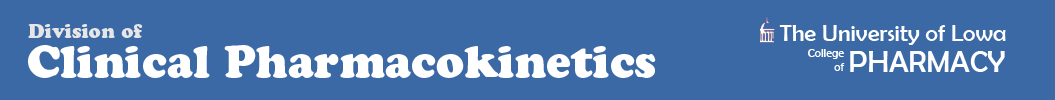
<style>
.page{position:relative;width:1055px;height:100px;background:#3b69a5}
.page>*{position:absolute;margin:0}
.t1{font:19.4px "CooperBlackStd";color:#e6e6e6}
.t2{font:24px "BerlinSansFB-Reg";color:#ffffff}
.t3{font:44.4px "CooperBlackStd";color:#ffffff}
.t4{font:12px "BerlinSansFB-Reg";color:#ffffff}
.t5{font:30px "BerlinSansFB-Reg";color:#ffffff}
</style>
<div class="page">
<p class="t1" style="left:28px;top:24px;width:115px;height:14px">Division of</p>
<p class="t2" style="left:779px;top:25px;width:227px;height:20px">The University of Lowa</p>
<p class="t3" style="left:28px;top:45px;width:628px;height:33px">Clinical Pharmacokinetics</p>
<p class="t4" style="left:808px;top:49px;width:37px;height:22px;text-align:right">College<br>of</p>
<p class="t5" style="left:850px;top:51px;width:155px;height:21px">PHARMACY</p>
</div>
